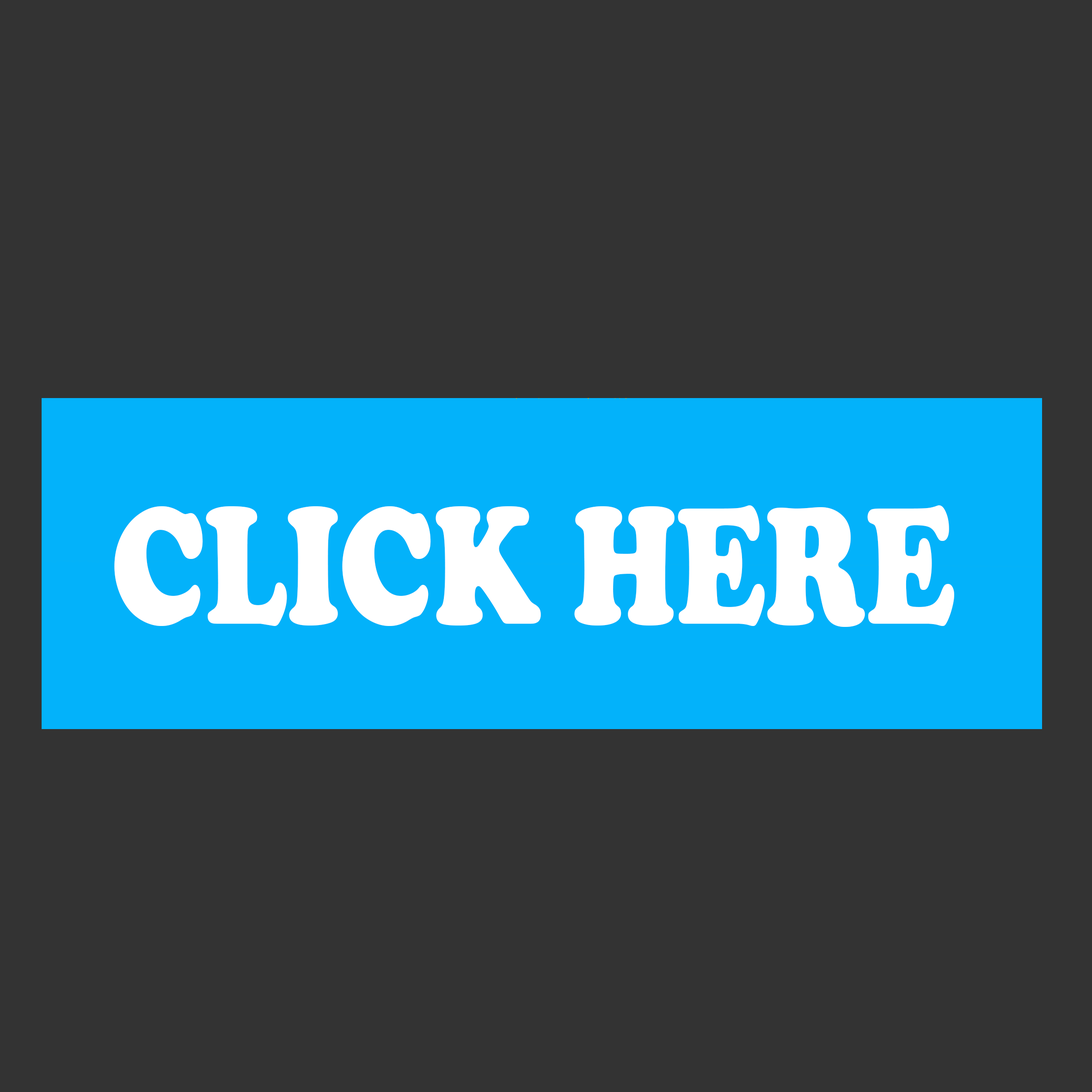
<style>
.page{position:relative;width:1092px;height:1092px;background:#333333}
.page>*{position:absolute;margin:0}
.t1{font:173.1px "CooperBlack";color:#ffffff;scale:0.75 1}
</style>
<div class="page">
<p class="t1" style="left:114px;top:505px;width:840px;height:122px">CLICK HERE</p>
</div>
